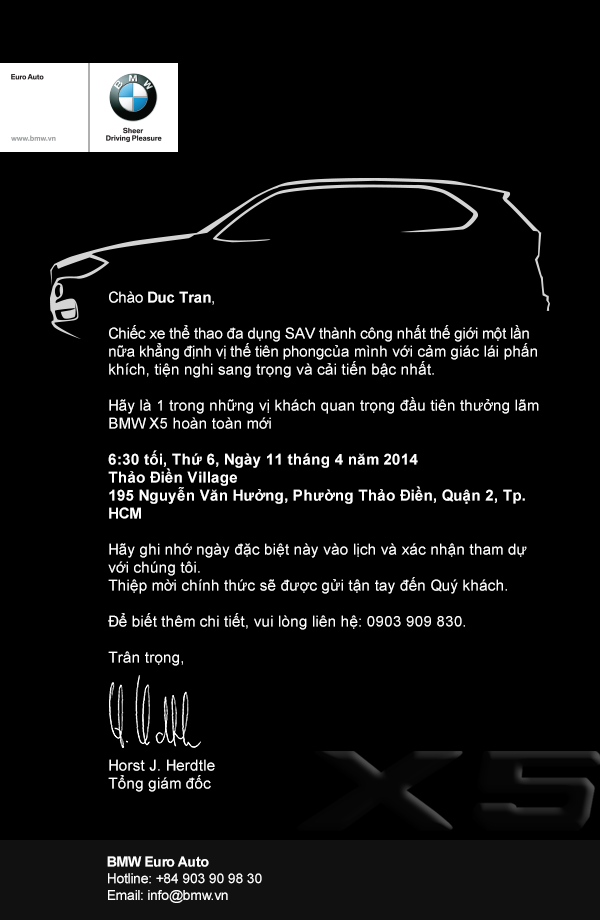
<style>
.page{position:relative;width:600px;height:920px;background:#000000}
.page>*{position:absolute;margin:0}
.t1{font:15px "ArialMT";color:#ffffff}
.t2{font:15px "ArialMT";letter-spacing:-0.025em;color:#ffffff}
.t3{font:15px "Arial-BoldMT";letter-spacing:-0.025em;color:#ffffff}
.t4{font:15px "Arial-BoldMT";color:#ffffff}
.t5{font:14px "ArialMT";letter-spacing:-0.025em;color:#ffffff}
.t6{font:14px "Arial-BoldMT";letter-spacing:-0.025em;color:#ffffff}
</style>
<div class="page">
<p class="t1" style="left:108px;top:291px;width:431px;height:501px"><span class="t2">Chào </span><span class="t3">Duc Tran</span><span class="t2">,<br><br>Chiếc xe thể thao đa dụng SAV thành công nhất thế giới một lần nữa khẳng định vị thế tiên phong</span>của mình với cảm giác lái phấn khích, tiện nghi sang trọng và cải tiến bậc nhất.<br><br>Hãy là 1 trong những vị khách quan trọng đầu tiên thưởng lãm BMW X5 hoàn toàn mới<br><br><span class="t4">6:30 tối, Thứ 6, Ngày 11 tháng 4 năm 2014<br>Thảo Điền Village<br>195 Nguyễn Văn Hưởng, Phường Thảo Điền, Quận 2, Tp. HCM<br></span><br>Hãy ghi nhớ ngày đặc biệt này vào lịch và xác nhận tham dự với chúng tôi.      <br>Thiệp mời chính thức sẽ được gửi tận tay đến Quý khách.<br><br>Để biết thêm chi tiết, vui lòng liên hệ: 0903 909 830.<br><br>Trân trọng,<br><br><br><br><br><br>Horst J. Herdtle<br>Tổng giám đốc</p>
<p class="t5" style="left:107px;top:856px;width:155px;height:47px"><span class="t6">BMW Euro Auto<br></span>Hotline: +84 903 90 98 30<br>Email: info@bmw.vn</p>
</div>
